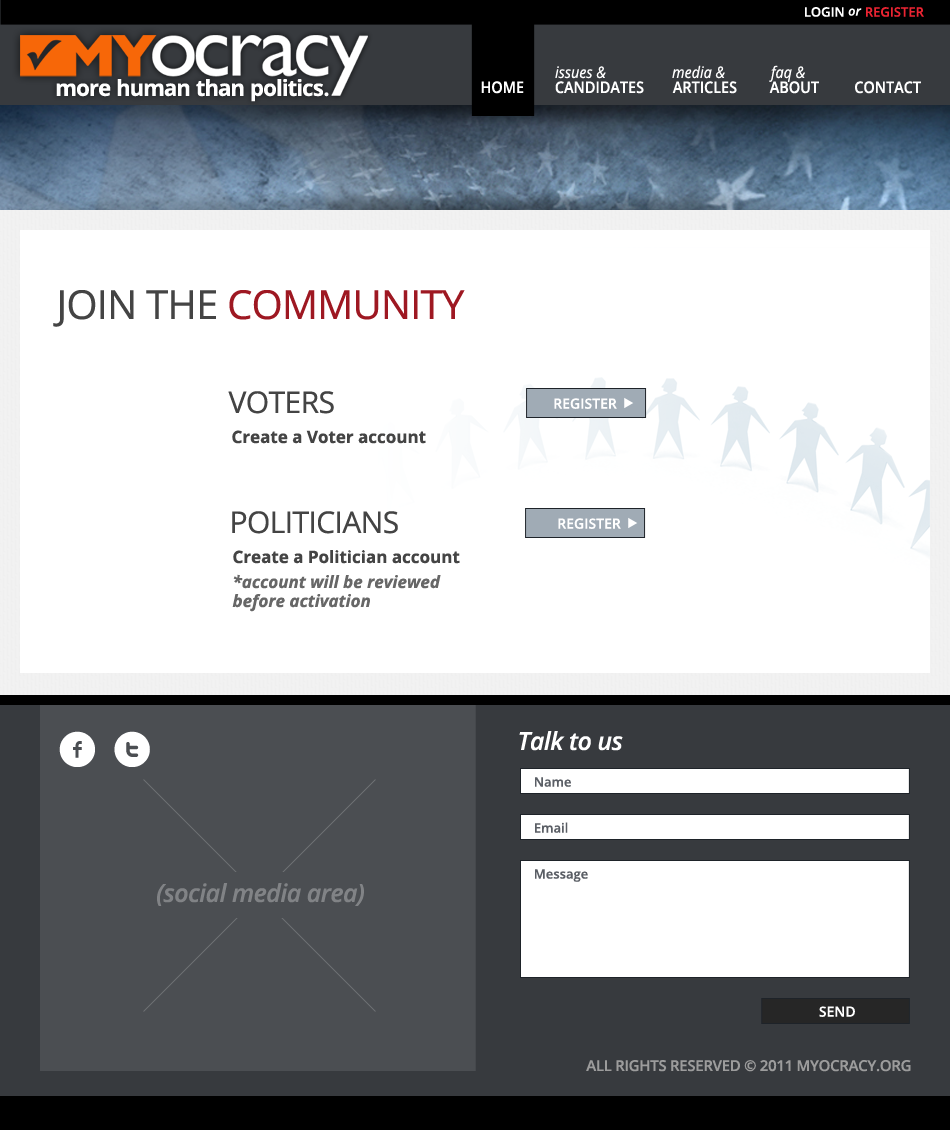
<style>
.page{position:relative;width:950px;height:1130px;background:#ffffff}
.page>*{position:absolute;margin:0}
.t1{font:13px "OpenSans-Semibold";color:#ffffff;text-transform:uppercase}
.t2{font:13px "OpenSans-SemiboldItalic";color:#ffffff}
.t3{font:13px "OpenSans-Semibold";color:#ec2432;text-transform:uppercase}
.t4{font:16px "OpenSans-Italic";color:#ffffff;scale:0.9 1}
.t5{font:22.2px "OpenSans-Bold";letter-spacing:-0.02em;color:#ffffff}
.t6{font:16px "OpenSans-Semibold";color:#ffffff;text-transform:uppercase;scale:0.9 1}
.t7{font:40px "OpenSans";letter-spacing:-0.02em;color:#9e1822;text-transform:uppercase}
.t8{font:40px "OpenSans";letter-spacing:-0.02em;color:#444444;text-transform:uppercase}
.t9{font:30px "OpenSans";letter-spacing:-0.02em;color:#444444;text-transform:uppercase}
.t10{font:14px "OpenSans-Semibold";color:#ffffff;text-transform:uppercase}
.t11{font:17px "OpenSans-Bold";color:#444444}
.t12{font:17px/19px "OpenSans-BoldItalic";color:#676767}
.t13{font:17px/19px "OpenSans-Bold";color:#444444}
.t14{font:50px "Socialico";letter-spacing:0.3em;color:#ffffff}
.t15{font:25px "OpenSans-SemiboldItalic";letter-spacing:-0.02em;color:#ffffff}
.t16{font:13px "OpenSans-Semibold";color:#5a5e65}
.t17{font:25px "OpenSans-SemiboldItalic";letter-spacing:-0.02em;color:#818386}
.t18{font:14px "OpenSans-Semibold";color:#ffffff}
.t19{font:15px "OpenSans-Semibold";letter-spacing:-0.02em;color:#9c9c9c;text-transform:uppercase}
</style>
<div class="page">
<p class="t1" style="left:805px;top:7px;width:57px;height:10px">Login <span class="t2">or</span></p>
<p class="t3" style="left:866px;top:7px;width:58px;height:10px">Register</p>
<p class="t4" style="left:672px;top:65px;width:53px;height:14px">media &amp;</p>
<p class="t4" style="left:769px;top:65px;width:36px;height:17px">faq &amp;</p>
<p class="t4" style="left:555px;top:66px;width:51px;height:13px">issues &amp;</p>
<p class="t5" style="left:56px;top:79px;width:273px;height:23px">more human than politics.</p>
<p class="t6" style="left:481px;top:81px;width:43px;height:13px">home</p>
<p class="t6" style="left:555px;top:81px;width:89px;height:13px">candidates</p>
<p class="t6" style="left:672px;top:81px;width:65px;height:13px">articles</p>
<p class="t6" style="left:769px;top:81px;width:50px;height:13px">ABOUT</p>
<p class="t6" style="left:855px;top:81px;width:66px;height:13px">contact</p>
<p class="t7" style="left:53px;top:290px;width:412px;height:37px"><span class="t8">Join the </span>Community</p>
<p class="t9" style="left:228px;top:391px;width:106px;height:23px">Voters</p>
<p class="t10" style="left:554px;top:398px;width:63px;height:11px">Register</p>
<p class="t11" style="left:232px;top:430px;width:194px;height:14px">Create a Voter account</p>
<p class="t9" style="left:232px;top:511px;width:166px;height:23px">Politicians</p>
<p class="t10" style="left:558px;top:518px;width:63px;height:11px">Register</p>
<p class="t12" style="left:232px;top:550px;width:228px;height:62px"><span class="t13">Create a Politician account<br></span>*account will be reviewed<br>before activation</p>
<p class="t14" style="left:59px;top:731px;width:91px;height:36px">ft</p>
<p class="t15" style="left:519px;top:731px;width:104px;height:20px">Talk to us</p>
<p class="t16" style="left:535px;top:777px;width:36px;height:10px">Name</p>
<p class="t16" style="left:535px;top:822px;width:33px;height:11px">Email</p>
<p class="t16" style="left:535px;top:869px;width:53px;height:13px">Message</p>
<p class="t17" style="left:157px;top:883px;width:207px;height:23px">(social media area)</p>
<p class="t18" style="left:819px;top:1006px;width:36px;height:11px">SEND</p>
<p class="t19" style="left:586px;top:1060px;width:325px;height:12px">all rights reserved © 2011 myocracy.org</p>
</div>
